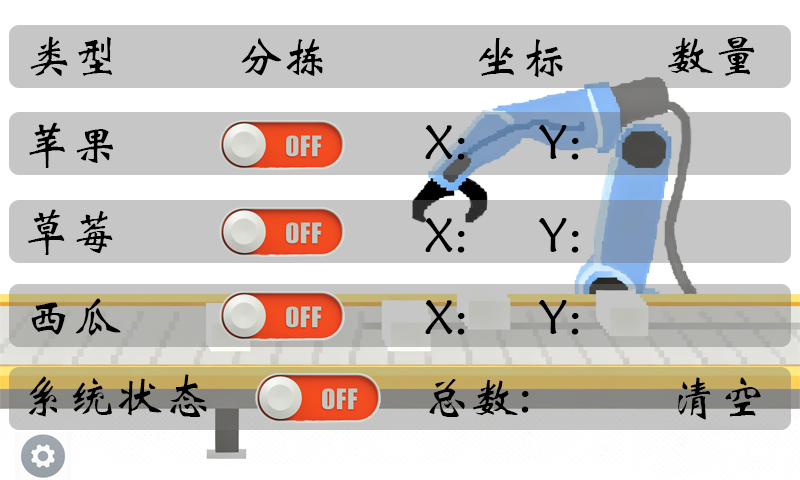
<style>
.page{position:relative;width:800px;height:480px;background:#c6c6c6}
.page>*{position:absolute;margin:0}
.t1{font:48px "STXinwei";color:#000000}
</style>
<div class="page">
<p class="t1" style="left:30px;top:36px;width:82px;height:40px">类型</p>
<p class="t1" style="left:241px;top:38px;width:82px;height:38px">分拣</p>
<p class="t1" style="left:479px;top:38px;width:84px;height:39px">坐标</p>
<p class="t1" style="left:668px;top:37px;width:87px;height:39px">数量</p>
<p class="t1" style="left:29px;top:122px;width:84px;height:46px">苹果</p>
<p class="t1" style="left:425px;top:125px;width:154px;height:35px">X:      Y:</p>
<p class="t1" style="left:28px;top:209px;width:85px;height:46px">草莓</p>
<p class="t1" style="left:425px;top:218px;width:154px;height:35px">X:      Y:</p>
<p class="t1" style="left:31px;top:298px;width:90px;height:38px">西瓜</p>
<p class="t1" style="left:425px;top:300px;width:154px;height:35px">X:      Y:</p>
<p class="t1" style="left:29px;top:374px;width:178px;height:43px">系统状态</p>
<p class="t1" style="left:678px;top:377px;width:83px;height:43px">清空</p>
<p class="t1" style="left:429px;top:379px;width:100px;height:38px">总数:</p>
</div>
